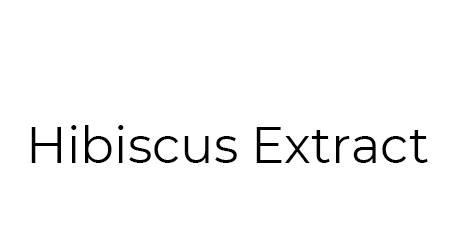
<style>
.page{position:relative;width:455px;height:238px;background:#ffffff}
.page>*{position:absolute;margin:0}
.t1{font:50px "Montserrat-Regular";color:#000000}
</style>
<div class="page">
<p class="t1" style="left:31px;top:125px;width:397px;height:38px">Hibiscus Extract</p>
</div>
